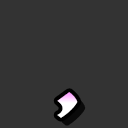
<style>
.page{position:relative;width:128px;height:128px;background:#333333}
.page>*{position:absolute;margin:0}
.t1{font:160px "EnchantedLand";color:#ffffff}
</style>
<div class="page">
<p class="t1" style="left:57px;top:92px;width:21px;height:26px">,</p>
</div>
